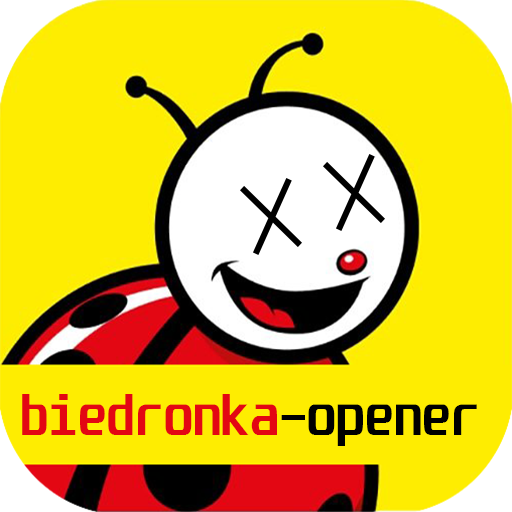
<style>
.page{position:relative;width:512px;height:512px;background:#feed01}
.page>*{position:absolute;margin:0}
.t1{font:48.1px "Unispace-Bold";color:#e30713}
.t2{font:48.1px "Unispace-Bold";color:#000000}
</style>
<div class="page">
<p class="t1" style="left:22px;top:394px;width:455px;height:52px">biedronka<span class="t2">-opener</span></p>
</div>
